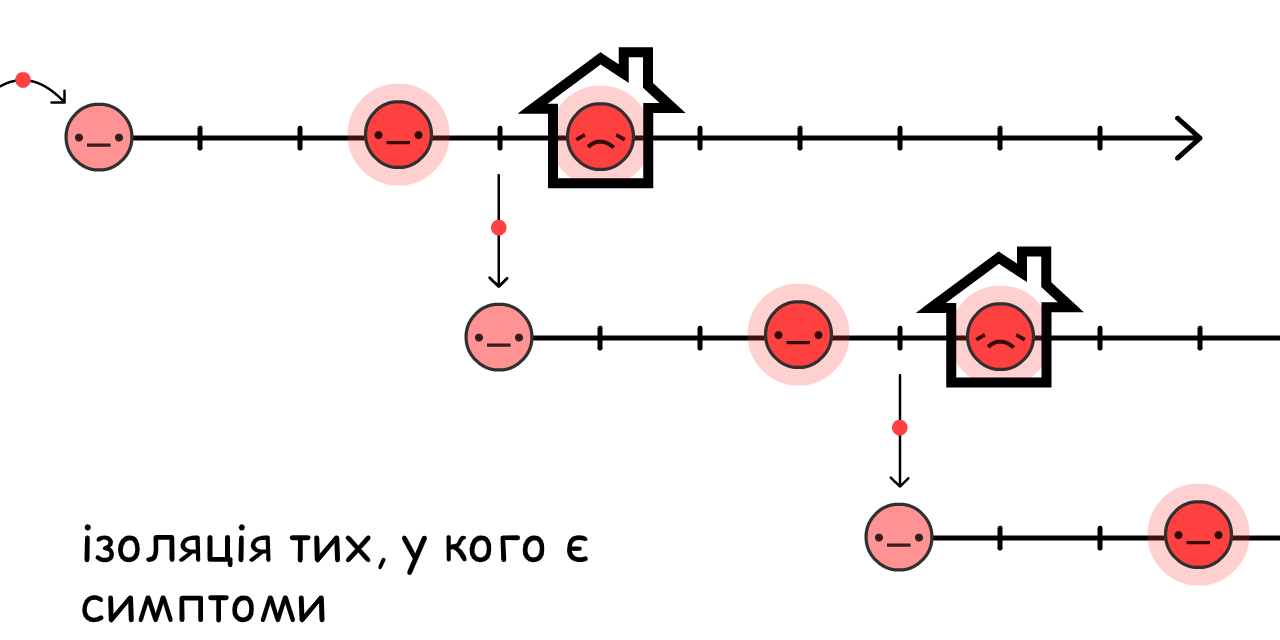
<style>
.page{position:relative;width:1280px;height:640px;background:#ffffff}
.page>*{position:absolute;margin:0}
.t1{font:50px "ComicRelief";color:#000000}
</style>
<div class="page">
<p class="t1" style="left:82px;top:524px;width:507px;height:100px">ізоляція тих, у кого є<br>симптоми</p>
</div>
